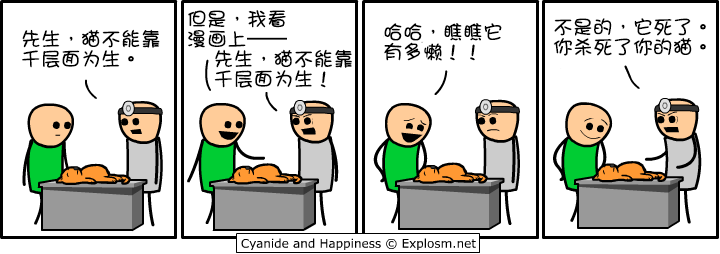
<style>
.page{position:relative;width:720px;height:254px;background:#ffffff}
.page>*{position:absolute;margin:0}
.t1{font:20px/20px "DFGirl";color:#000000}
</style>
<div class="page">
<p class="t1" style="left:188px;top:10px;width:164px;height:78px">但是，我看<br>漫画上——<br>    先生，猫不能靠<br>    千层面为生！</p>
<p class="t1" style="left:22px;top:29px;width:138px;height:39px">先生，猫不能靠<br>千层面为生。</p>
<p class="t1" style="left:384px;top:23px;width:118px;height:38px">哈哈，瞧瞧它<br>有多懒！！</p>
<p class="t1" style="left:553px;top:18px;width:153px;height:38px">不是的，它死了。<br>你杀死了你的猫。</p>
</div>
